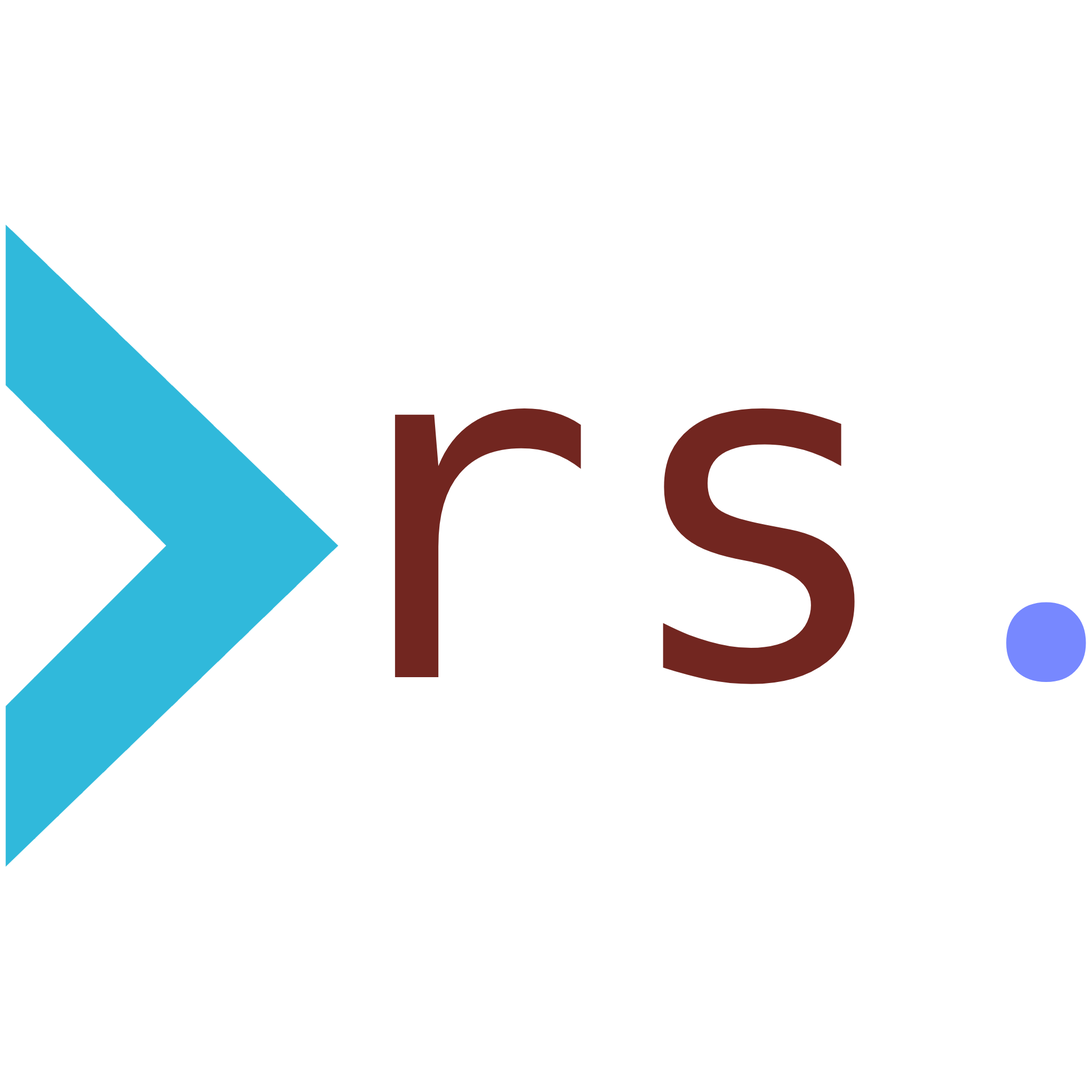
<style>
.page{position:relative;width:1092px;height:1092px;background:#ffffff}
.page>*{position:absolute;margin:0}
.t1{font:479.9px "Hack-Regular";color:#722620}
.t2{font:479.9px "JetBrainsMono-Regular";color:#7788ff}
</style>
<div class="page">
<p class="t1" style="left:395px;top:408px;width:691px;height:276px">rs<span class="t2">.</span></p>
</div>
